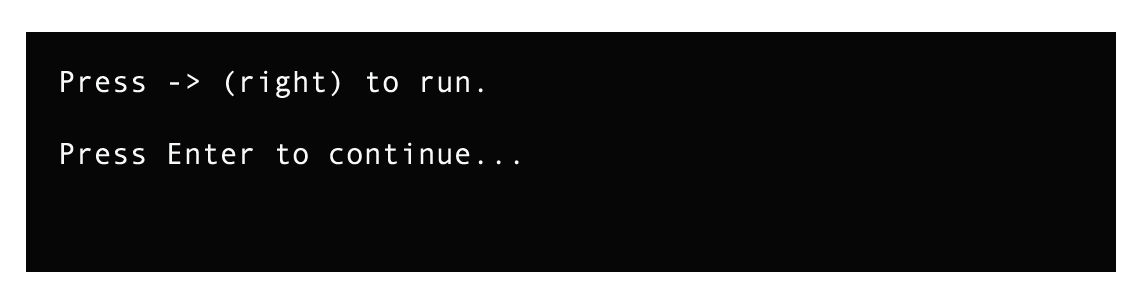
<style>
.page{position:relative;width:1134px;height:308px;background:#070606}
.page>*{position:absolute;margin:0}
.t1{font:30px "AndaleMono";color:#f8f9f9}
</style>
<div class="page">
<p class="t1" style="left:61px;top:70px;width:458px;height:95px">Press -&gt; (right) to run.<br><br>Press Enter to continue...</p>
</div>
